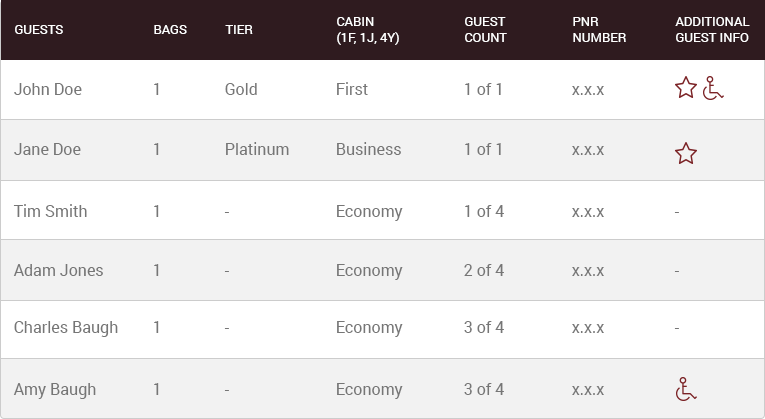
<style>
.page{position:relative;width:765px;height:419px;background:#ffffff}
.page>*{position:absolute;margin:0}
.t1{font:13px "Roboto-Regular";color:#ffffff;text-transform:uppercase}
.t2{font:16px "Roboto-Regular";color:#767676}
.t3{font:16px "Roboto-Regular";color:#7b2326}
</style>
<div class="page">
<p class="t1" style="left:337px;top:17px;width:62px;height:28px">Cabin<br>(1F, 1J, 4Y)</p>
<p class="t1" style="left:465px;top:17px;width:42px;height:25px">Guest<br>Count</p>
<p class="t1" style="left:573px;top:17px;width:53px;height:25px">PNR<br>Number</p>
<p class="t1" style="left:675px;top:17px;width:75px;height:25px">Additional<br>Guest Info</p>
<p class="t1" style="left:15px;top:25px;width:48px;height:9px">Guests</p>
<p class="t1" style="left:154px;top:25px;width:33px;height:9px">Bags</p>
<p class="t1" style="left:225px;top:25px;width:28px;height:9px">Tier</p>
<p class="t2" style="left:14px;top:83px;width:68px;height:12px">John Doe</p>
<p class="t2" style="left:154px;top:83px;width:5px;height:12px">1</p>
<p class="t2" style="left:225px;top:83px;width:32px;height:12px">Gold</p>
<p class="t2" style="left:337px;top:82px;width:31px;height:13px">First</p>
<p class="t2" style="left:465px;top:83px;width:36px;height:12px">1 of 1</p>
<p class="t2" style="left:572px;top:86px;width:32px;height:9px">x.x.x</p>
<p class="t2" style="left:14px;top:143px;width:67px;height:12px">Jane Doe</p>
<p class="t2" style="left:154px;top:143px;width:5px;height:12px">1</p>
<p class="t2" style="left:226px;top:142px;width:63px;height:13px">Platinum</p>
<p class="t2" style="left:337px;top:142px;width:64px;height:13px">Business</p>
<p class="t2" style="left:465px;top:143px;width:36px;height:12px">1 of 1</p>
<p class="t2" style="left:572px;top:146px;width:32px;height:9px">x.x.x</p>
<p class="t3" style="left:674px;top:150px;width:5px;height:1px">-</p>
<p class="t2" style="left:13px;top:204px;width:74px;height:13px">Tim Smith</p>
<p class="t2" style="left:154px;top:205px;width:5px;height:12px">1</p>
<p class="t2" style="left:337px;top:205px;width:66px;height:16px">Economy</p>
<p class="t2" style="left:465px;top:205px;width:39px;height:12px">1 of 4</p>
<p class="t2" style="left:572px;top:208px;width:32px;height:9px">x.x.x</p>
<p class="t2" style="left:224px;top:212px;width:5px;height:1px">-</p>
<p class="t2" style="left:674px;top:212px;width:5px;height:1px">-</p>
<p class="t2" style="left:13px;top:264px;width:90px;height:12px">Adam Jones</p>
<p class="t2" style="left:154px;top:264px;width:5px;height:12px">1</p>
<p class="t2" style="left:337px;top:264px;width:66px;height:16px">Economy</p>
<p class="t2" style="left:464px;top:264px;width:40px;height:12px">2 of 4</p>
<p class="t2" style="left:572px;top:267px;width:32px;height:9px">x.x.x</p>
<p class="t2" style="left:224px;top:271px;width:5px;height:1px">-</p>
<p class="t2" style="left:674px;top:271px;width:5px;height:1px">-</p>
<p class="t2" style="left:14px;top:321px;width:104px;height:16px">Charles Baugh</p>
<p class="t2" style="left:154px;top:321px;width:5px;height:12px">1</p>
<p class="t2" style="left:224px;top:328px;width:5px;height:1px">-</p>
<p class="t2" style="left:337px;top:321px;width:66px;height:16px">Economy</p>
<p class="t2" style="left:464px;top:321px;width:40px;height:12px">3 of 4</p>
<p class="t2" style="left:572px;top:324px;width:32px;height:9px">x.x.x</p>
<p class="t2" style="left:674px;top:328px;width:5px;height:1px">-</p>
<p class="t2" style="left:13px;top:383px;width:83px;height:16px">Amy Baugh</p>
<p class="t2" style="left:154px;top:383px;width:5px;height:12px">1</p>
<p class="t2" style="left:224px;top:390px;width:5px;height:1px">-</p>
<p class="t2" style="left:337px;top:383px;width:66px;height:16px">Economy</p>
<p class="t2" style="left:464px;top:383px;width:40px;height:12px">3 of 4</p>
<p class="t2" style="left:572px;top:386px;width:32px;height:9px">x.x.x</p>
</div>
